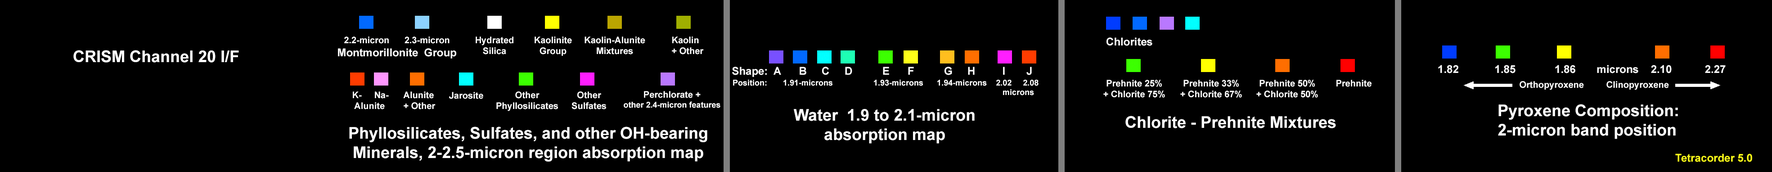
<style>
.page{position:relative;width:1772px;height:172px;background:#000000}
.page>*{position:absolute;margin:0}
.t1{font:9px "Arial-BoldMT";color:#fefefe}
.t2{font:10.8px "Arial-BoldMT";color:#fefefe}
.t3{font:16.2px "Arial-BoldMT";color:#fefefe}
.t4{font:10.8px "Arial-BoldMT";color:#ffffff}
.t5{font:8.1px "Arial-BoldMT";color:#ffffff}
.t6{font:9px "Arial-BoldMT";color:#ffffff}
.t7{font:10.8px "Arial-BoldMT";color:#ffff1a}
</style>
<div class="page">
<p class="t1" style="left:338px;top:36px;width:118px;height:22px;text-align:center">2.2-micron      2.3-micron<br><span class="t2">Montmorillonite  Group</span></p>
<p class="t1" style="left:476px;top:36px;width:37px;height:18px;text-align:center">Hydrated<br>Silica</p>
<p class="t1" style="left:535px;top:36px;width:37px;height:20px;text-align:center">Kaolinite<br>Group</p>
<p class="t1" style="left:585px;top:36px;width:60px;height:18px;text-align:center">Kaolin-Alunite<br>Mixtures</p>
<p class="t1" style="left:672px;top:36px;width:32px;height:18px">Kaolin<br>+ Other</p>
<p class="t2" style="left:1107px;top:37px;width:45px;height:9px">Chlorites</p>
<p class="t3" style="left:73px;top:50px;width:166px;height:13px">CRISM Channel 20 I/F</p>
<p class="t2" style="left:1438px;top:65px;width:288px;height:8px">1.82            1.85             1.86       microns    2.10           2.27</p>
<p class="t4" style="left:732px;top:67px;width:300px;height:10px">Shape:  A      B     C     D          E      F          G     H         I       J</p>
<p class="t5" style="left:733px;top:80px;width:306px;height:15px">Position:       1.91-microns                  1.93-microns      1.94-microns    2.02     2.08<br>                                                                                                                        microns</p>
<p class="t1" style="left:1103px;top:80px;width:62px;height:18px;text-align:center">Prehnite 25%<br>+ Chlorite 75%</p>
<p class="t1" style="left:1180px;top:80px;width:62px;height:18px;text-align:center">Prehnite 33%<br>+ Chlorite 67%</p>
<p class="t1" style="left:1256px;top:80px;width:62px;height:18px;text-align:center">Prehnite 50%<br>+ Chlorite 50%</p>
<p class="t1" style="left:1336px;top:80px;width:36px;height:7px">Prehnite</p>
<p class="t1" style="left:1520px;top:81px;width:149px;height:9px">Orthopyroxene         Clinopyroxene</p>
<p class="t6" style="left:353px;top:91px;width:36px;height:18px">K-     Na-<br> Alunite</p>
<p class="t6" style="left:403px;top:91px;width:33px;height:18px">Alunite<br>+ Other</p>
<p class="t1" style="left:449px;top:92px;width:34px;height:7px">Jarosite</p>
<p class="t6" style="left:496px;top:91px;width:62px;height:20px;text-align:center">Other<br>Phyllosilicates</p>
<p class="t6" style="left:572px;top:91px;width:34px;height:18px;text-align:center">Other<br>Sulfates</p>
<p class="t5" style="left:624px;top:91px;width:96px;height:17px;text-align:center"><span class="t6">Perchlorate +<br></span>other 2.4-micron features</p>
<p class="t3" style="left:794px;top:109px;width:181px;height:35px;text-align:center">Water  1.9 to 2.1-micron<br>absorption map</p>
<p class="t3" style="left:1498px;top:104px;width:180px;height:35px">Pyroxene Composition: <br>2-micron band position</p>
<p class="t3" style="left:1125px;top:116px;width:211px;height:12px">Chlorite - Prehnite Mixtures</p>
<p class="t3" style="left:349px;top:126px;width:358px;height:36px;text-align:center">Phyllosilicates, Sulfates, and other OH-bearing<br>Minerals, 2-2.5-micron region absorption map</p>
<p class="t7" style="left:1675px;top:153px;width:77px;height:9px">Tetracorder 5.0</p>
</div>
